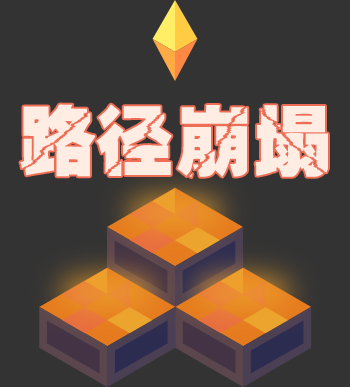
<style>
.page{position:relative;width:350px;height:387px;background:#333333}
.page>*{position:absolute;margin:0}
.t1{font:78.9px "PiliEG-Ultra-GB";color:#ffece3}
</style>
<div class="page">
<p class="t1" style="left:20px;top:104px;width:308px;height:74px">路径崩塌</p>
</div>
